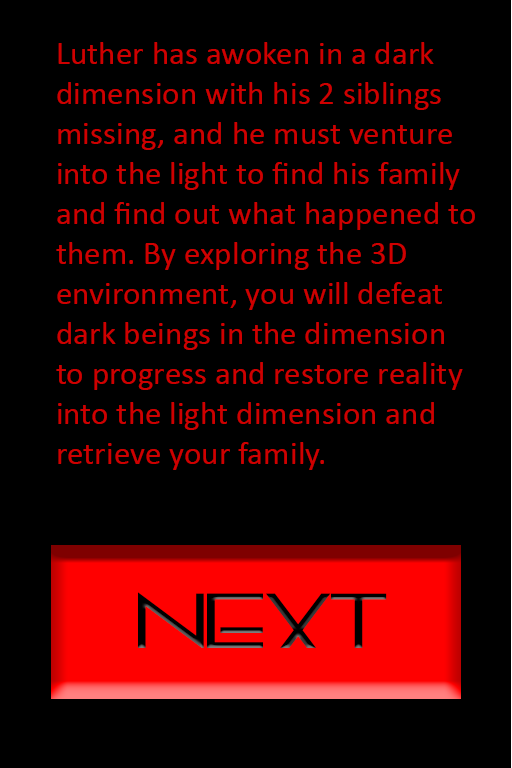
<style>
.page{position:relative;width:512px;height:768px;background:#000000}
.page>*{position:absolute;margin:0}
.t1{font:33.3px "Calibri";color:#ce0000}
.t2{font:75px "Vonique64-Bold";color:#000000;scale:1.33 1}
</style>
<div class="page">
<p class="t1" style="left:56px;top:42px;width:419px;height:428px">Luther has awoken in a dark<br>dimension with his 2 siblings<br>missing, and he must venture<br>into the light to find his family<br>and find out what happened to<br>them. By exploring the 3D<br>environment, you will defeat<br>dark beings in the dimension<br>to progress and restore reality<br>into the light dimension and<br>retrieve your family.</p>
<p class="t2" style="left:138px;top:592px;width:249px;height:56px">NEXT</p>
</div>
